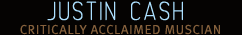
<style>
.page{position:relative;width:242px;height:35px;background:#050302}
.page>*{position:absolute;margin:0}
.t1{font:33.7px "232MKSDRoundLight";letter-spacing:0.05em;color:#ade0ff;font-variant:small-caps}
.t2{font:13px "MetaPlusNormal-Roman";letter-spacing:0.05em;color:#85603c}
</style>
<div class="page">
<p class="t1" style="left:47px;top:1px;width:136px;height:20px">justin cash</p>
<p class="t2" style="left:20px;top:24px;width:200px;height:11px">CRITICALLY ACCLAIMED MUSCIAN</p>
</div>
